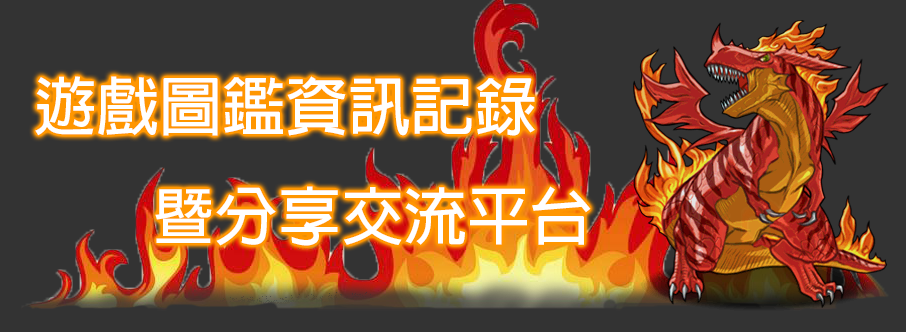
<style>
.page{position:relative;width:906px;height:332px;background:#333333}
.page>*{position:absolute;margin:0}
.t1{font:63px "AdobeFanHeitiStd-Bold";color:#ffffff}
</style>
<div class="page">
<p class="t1" style="left:35px;top:76px;width:556px;height:170px">遊戲圖鑑資訊記錄<br>   暨分享交流平台</p>
</div>
